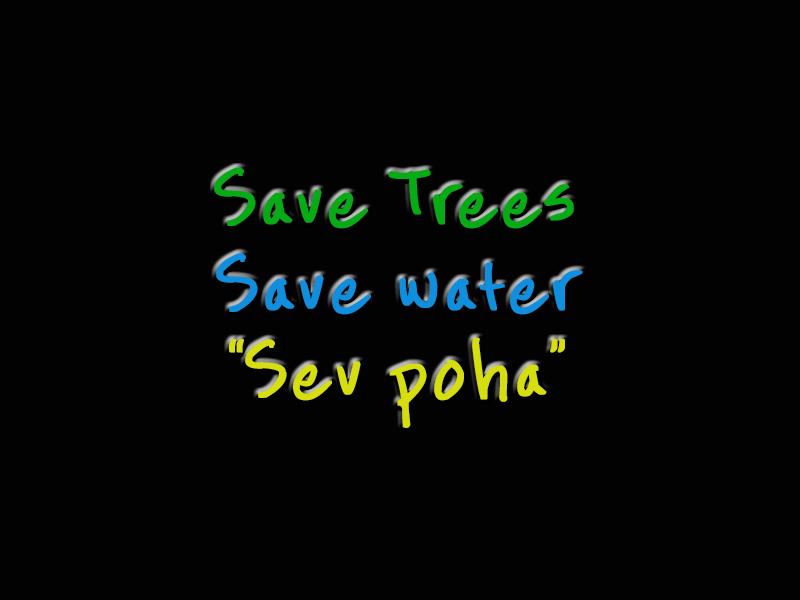
<style>
.page{position:relative;width:800px;height:600px;background:#020202}
.page>*{position:absolute;margin:0}
.t1{font:72px "BeesBurts";color:#07ab15;font-weight:bold}
.t2{font:72px "BeesBurts";color:#108fde;font-weight:bold}
.t3{font:72px "BeesBurts";color:#d7de10;font-weight:bold}
</style>
<div class="page">
<p class="t1" style="left:214px;top:167px;width:369px;height:261px;text-align:center">Save Trees<br><span class="t2">Save water<br></span><span class="t3">“Sev poha”</span></p>
</div>
